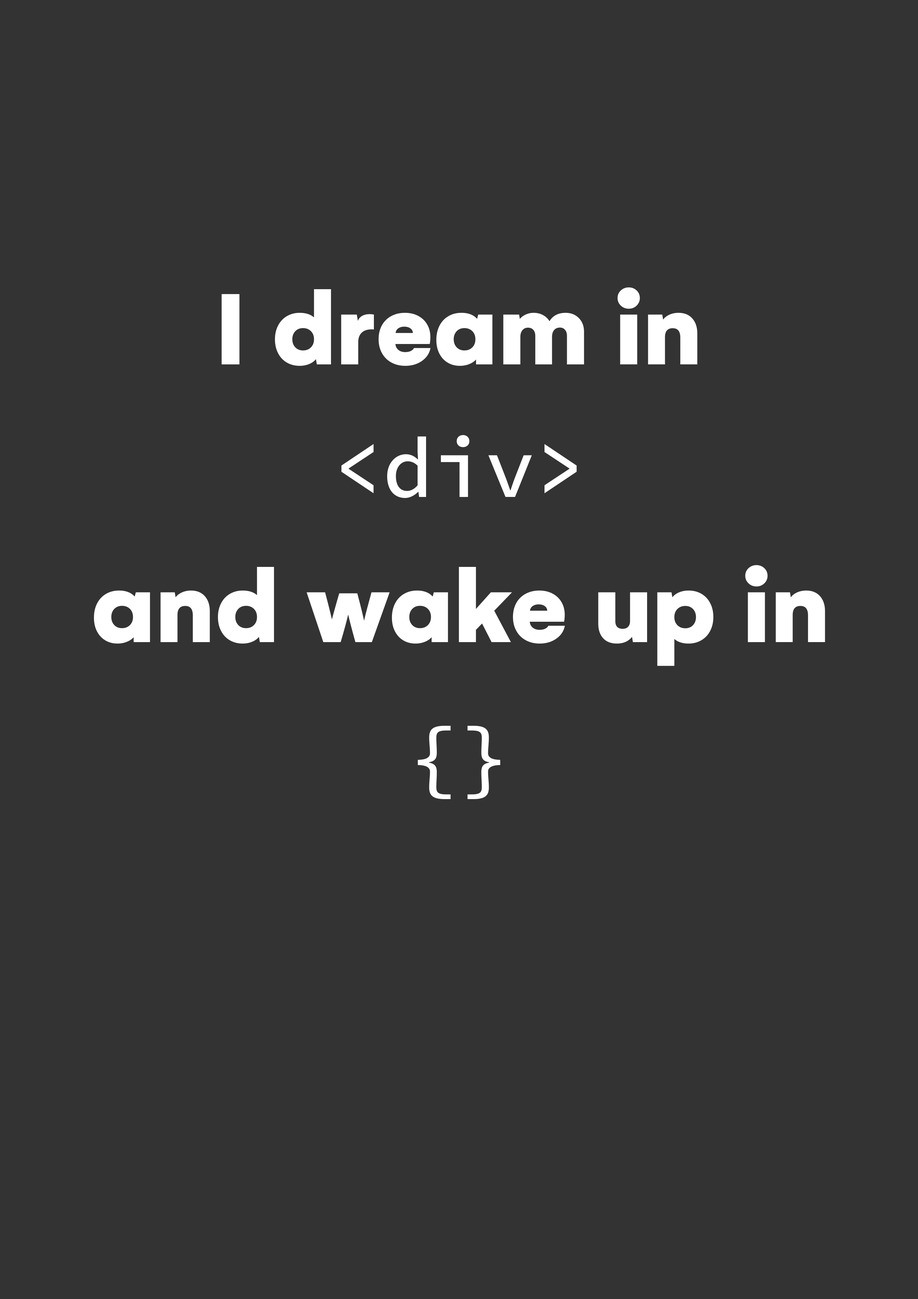
<style>
.page{position:relative;width:918px;height:1299px;background:#333333}
.page>*{position:absolute;margin:0}
.t1{font:109.6px "Gelion-Black";color:#ffffff}
.t2{font:85.2px "SourceCodePro-Medium";color:#ffffff}
</style>
<div class="page">
<p class="t1" style="left:221px;top:287px;width:476px;height:79px">I dream in</p>
<p class="t2" style="left:341px;top:435px;width:236px;height:63px">&lt;div&gt;</p>
<p class="t1" style="left:94px;top:565px;width:731px;height:101px">and wake up in</p>
<p class="t2" style="left:418px;top:726px;width:83px;height:73px">{}</p>
</div>
